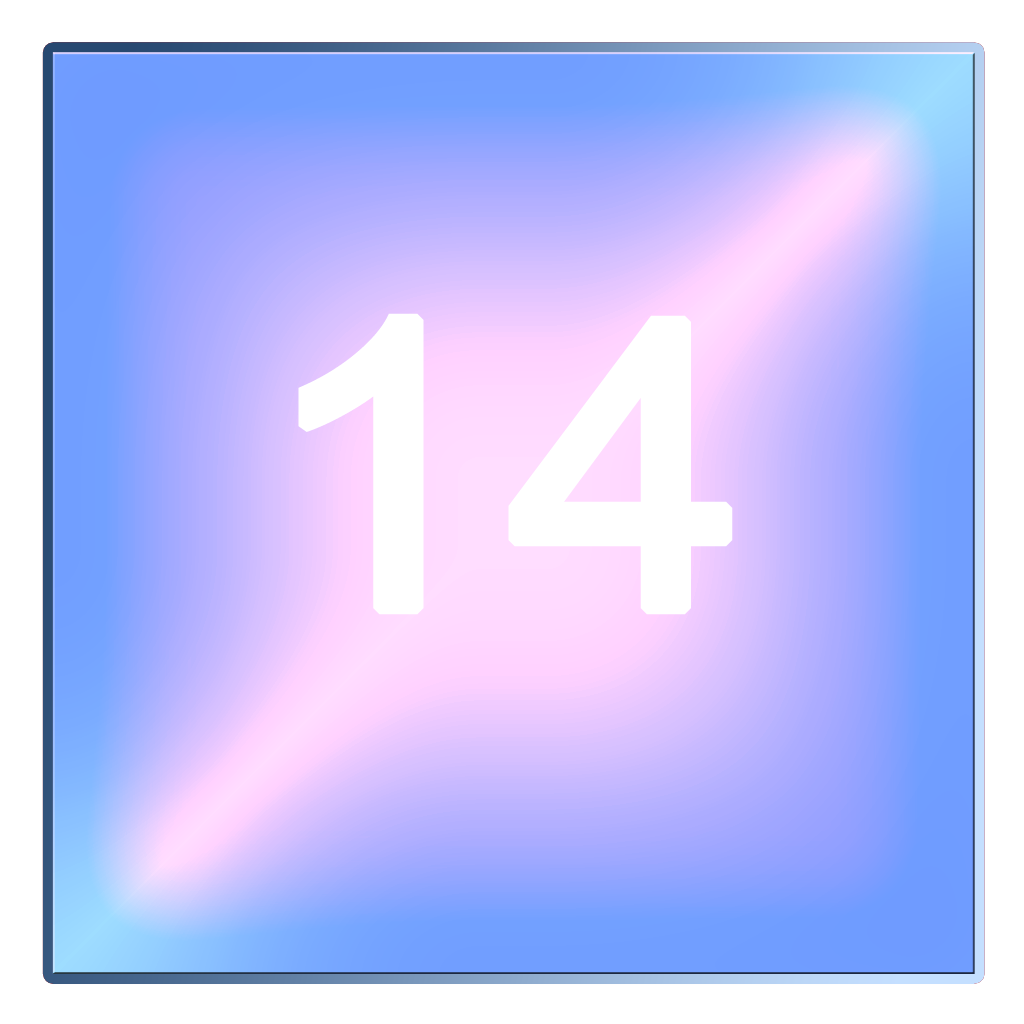
<style>
.page{position:relative;width:1024px;height:1024px}
.page>*{position:absolute;margin:0}
.t1{font:400px "ArialNarrow";color:#ffffff;font-weight:bold;scale:1.3 1}
</style>
<div class="page">
<p class="t1" style="left:298px;top:313px;width:435px;height:302px">14</p>
</div>
